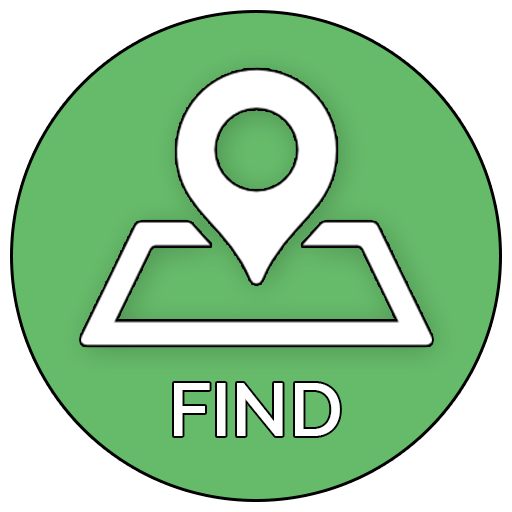
<style>
.page{position:relative;width:512px;height:512px;background:#ffffff}
.page>*{position:absolute;margin:0}
.t1{font:75px "Raleway-SemiBold";color:#ffffff}
</style>
<div class="page">
<p class="t1" style="left:174px;top:383px;width:166px;height:53px">FIND</p>
</div>
